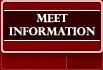
<style>
.page{position:relative;width:103px;height:70px;background:#7c0000}
.page>*{position:absolute;margin:0}
.t1{font:11px "PerpetuaTitlingMT-Bold";color:#ffffff}
.t2{font:11px "Tahoma";color:#ffffff}
</style>
<div class="page">
<p class="t1" style="left:9px;top:13px;width:87px;height:23px"><span class="t2">        </span>MEET <br>INFORMATION</p>
</div>
